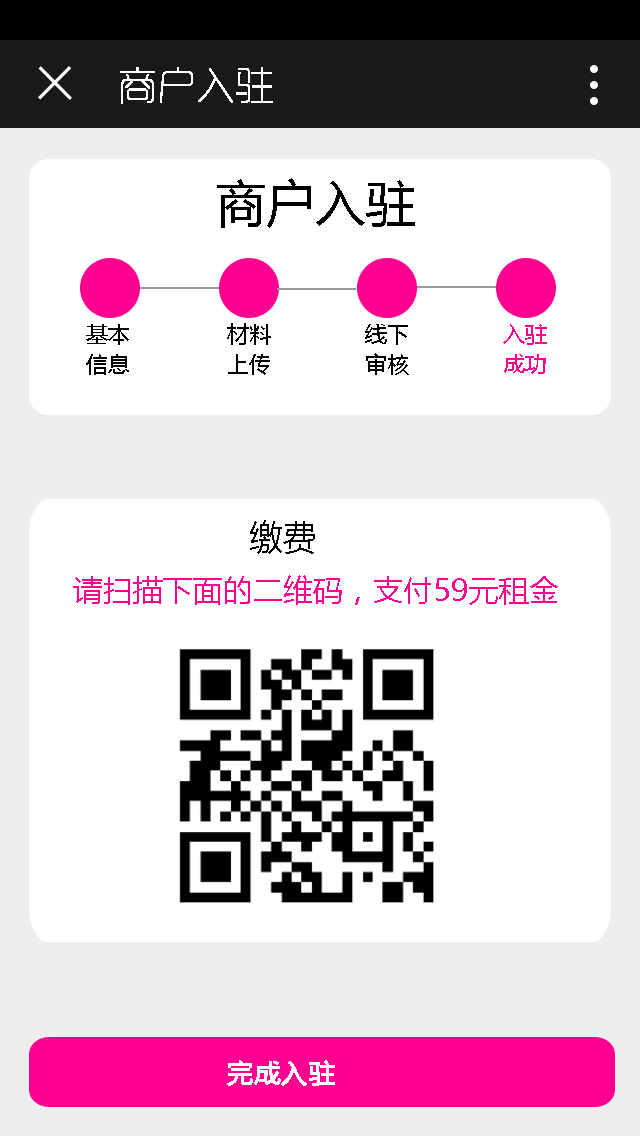
<style>
.page{position:relative;width:640px;height:1136px;background:#ffffff}
.page>*{position:absolute;margin:0}
.t1{font:38px "RTWSYueGoG0v1-ExLight";color:#ffffff;font-weight:bold}
.t2{font:50px "MicrosoftYaHei";color:#000000}
.t3{font:22px/30px "MicrosoftYaHei";color:#000000}
.t4{font:22px/30px "MicrosoftYaHei";color:#ff0090}
.t5{font:34px "MicrosoftYaHei";color:#000000}
.t6{font:30px "MicrosoftYaHei";color:#ff0090}
.t7{font:26px "MicrosoftYaHei";color:#ffffff;font-weight:bold}
</style>
<div class="page">
<p class="t1" style="left:120px;top:67px;width:153px;height:37px">商户入驻</p>
<p class="t2" style="left:217px;top:178px;width:198px;height:50px">商户入驻</p>
<p class="t3" style="left:86px;top:324px;width:43px;height:51px">基本<br>信息</p>
<p class="t3" style="left:227px;top:323px;width:44px;height:52px">材料<br>上传</p>
<p class="t3" style="left:365px;top:324px;width:44px;height:51px">线下<br>审核</p>
<p class="t4" style="left:503px;top:324px;width:44px;height:50px">入驻<br>成功</p>
<p class="t5" style="left:250px;top:520px;width:65px;height:34px">缴费</p>
<p class="t6" style="left:73px;top:575px;width:485px;height:30px">请扫描下面的二维码，支付59元租金</p>
<p class="t7" style="left:227px;top:1060px;width:108px;height:26px">完成入驻</p>
</div>
